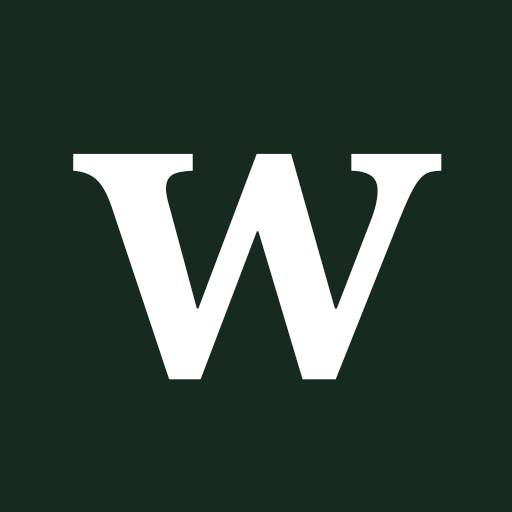
<style>
.page{position:relative;width:512px;height:512px;background:#162a20}
.page>*{position:absolute;margin:0}
.t1{font:416.7px "LibreBaskerville-Bold";color:#ffffff}
</style>
<div class="page">
<p class="t1" style="left:73px;top:153px;width:369px;height:227px">w</p>
</div>
